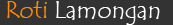
<style>
.page{position:relative;width:173px;height:25px;background:#333333}
.page>*{position:absolute;margin:0}
.t1{font:24px "TempusSansITC";color:#ffffff}
.t2{font:24px "TempusSansITC";color:#ff8a00}
</style>
<div class="page">
<p class="t1" style="left:7px;top:1px;width:153px;height:24px"><span class="t2">Roti </span>Lamongan</p>
</div>
